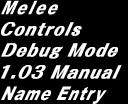
<style>
.page{position:relative;width:128px;height:104px;background:#000000}
.page>*{position:absolute;margin:0}
.t1{font:17.9px "FolkPro-Heavy";letter-spacing:0.1em;color:#ffffff;scale:0.87 1}
</style>
<div class="page">
<p class="t1" style="left:1px;top:22px;width:81px;height:14px">Controls</p>
<p class="t1" style="left:1px;top:43px;width:117px;height:16px">Debug Mode</p>
<p class="t1" style="left:1px;top:65px;width:121px;height:14px">1.03 Manual</p>
</div>
